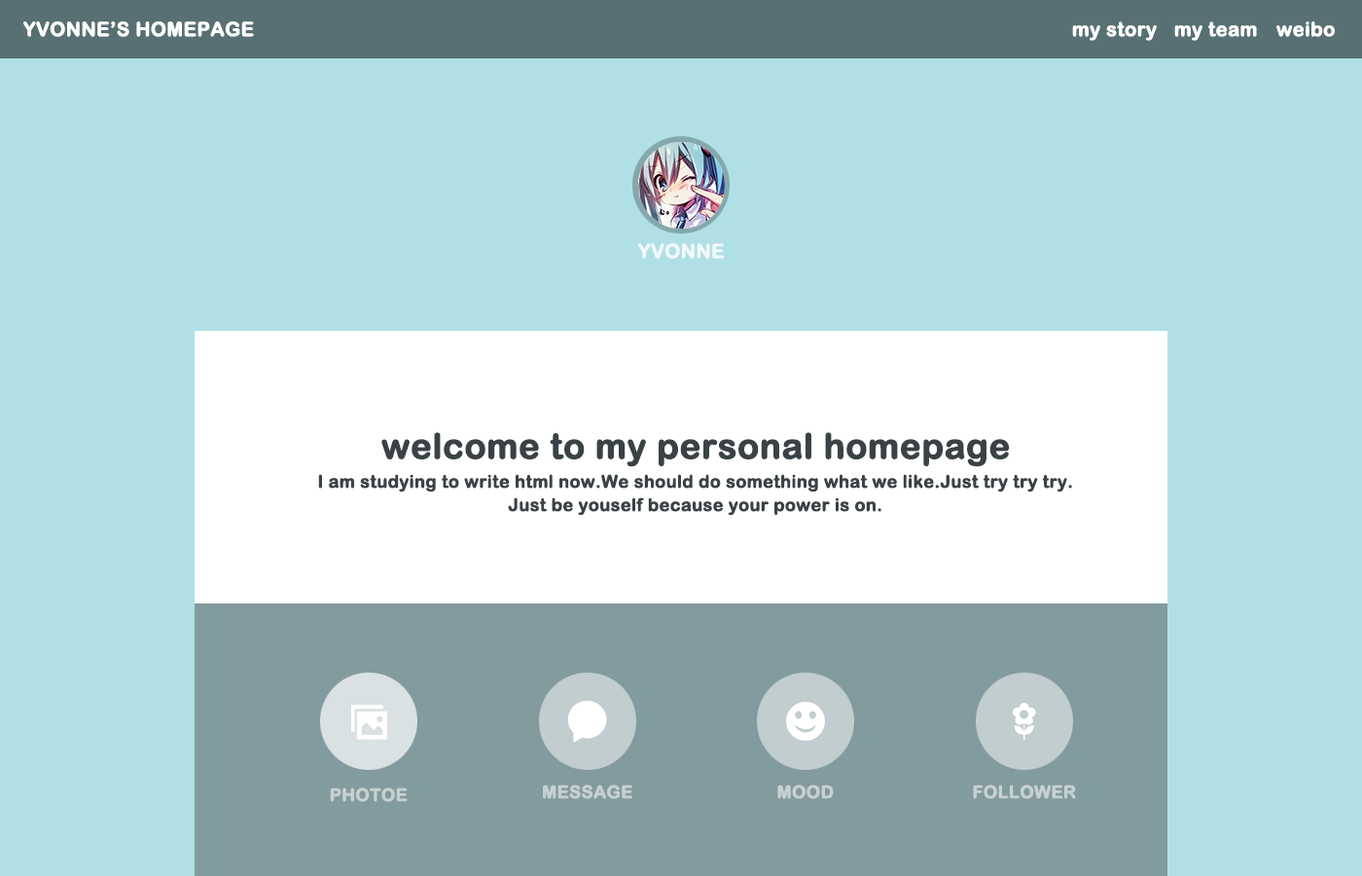
<style>
.page{position:relative;width:1362px;height:876px;background:#b0e0e6}
.page>*{position:absolute;margin:0}
.t1{font:19.5px "ArialRoundedMTBold";color:#ffffff;font-weight:bold}
.t2{font:35px "ArialRoundedMTBold";color:#3b4246;font-weight:bold}
.t3{font:17.5px/23.3px "ArialRoundedMTBold";color:#3b4246;font-weight:bold}
.t4{font:17.5px "ArialRoundedMTBold";color:#c7d1d2;font-weight:bold}
</style>
<div class="page">
<p class="t1" style="left:23px;top:21px;width:231px;height:16px">YVONNE’S HOMEPAGE</p>
<p class="t1" style="left:1072px;top:21px;width:85px;height:20px">my story</p>
<p class="t1" style="left:1174px;top:21px;width:83px;height:20px">my team</p>
<p class="t1" style="left:1276px;top:21px;width:59px;height:16px">weibo</p>
<p class="t1" style="left:638px;top:243px;width:87px;height:16px;opacity:0.8">YVONNE</p>
<p class="t2" style="left:381px;top:432px;width:629px;height:35px">welcome to my personal homepage</p>
<p class="t3" style="left:318px;top:474px;width:754px;height:42px;text-align:center">I am studying to write html now.We should do something what we like.Just try try try.<br>Just be youself because your power is on.</p>
<p class="t4" style="left:543px;top:784px;width:89px;height:15px">MESSAGE</p>
<p class="t4" style="left:777px;top:784px;width:57px;height:15px">MOOD</p>
<p class="t4" style="left:973px;top:784px;width:103px;height:15px">FOLLOWER</p>
<p class="t4" style="left:330px;top:787px;width:78px;height:15px">PHOTOE</p>
</div>
